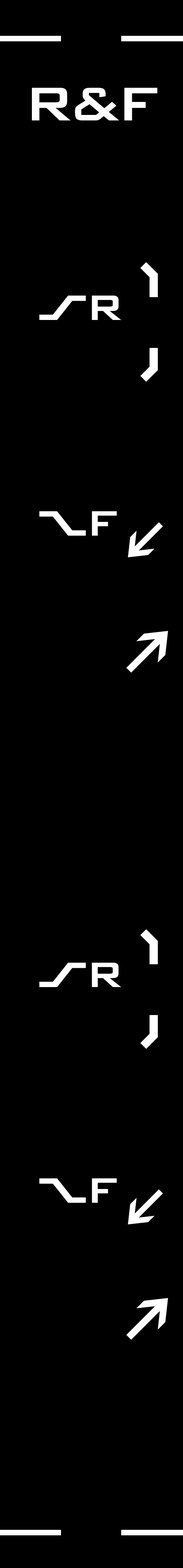
<style>
.page{position:relative;width:183px;height:1568px;background:#000000}
.page>*{position:absolute;margin:0}
.t1{font:63px "BankGothicBT-Medium";letter-spacing:-0.08em;color:#ffffff}
.t2{font:47.2px "BankGothicBT-Medium";letter-spacing:-0.14em;color:#ffffff}
</style>
<div class="page">
<p class="t1" style="left:32px;top:88px;width:125px;height:32px">R&amp;F</p>
<p class="t2" style="left:92px;top:296px;width:29px;height:24px">R</p>
<p class="t2" style="left:92px;top:511px;width:25px;height:25px">F</p>
<p class="t2" style="left:92px;top:963px;width:29px;height:24px">R</p>
<p class="t2" style="left:92px;top:1178px;width:25px;height:25px">F</p>
</div>
